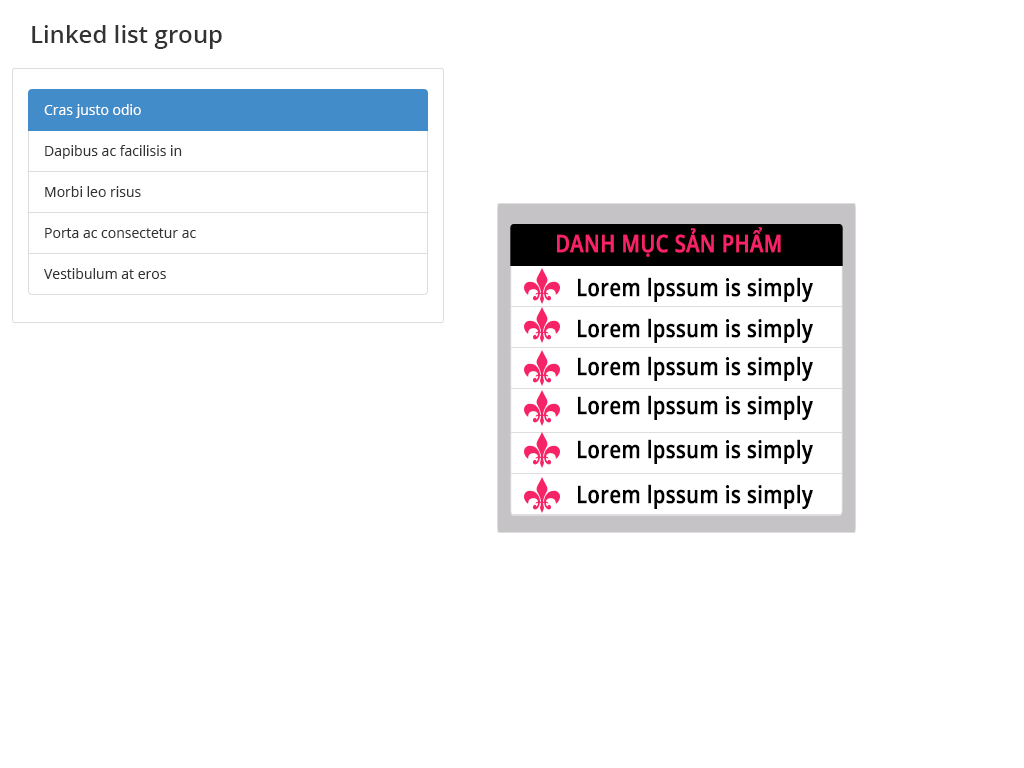
<style>
.page{position:relative;width:1024px;height:768px;background:#ffffff}
.page>*{position:absolute;margin:0}
.t1{font:24px "OpenSans-Semibold";color:#333333}
.t2{font:14px/41px "OpenSans";color:#333333}
.t3{font:14px/41px "OpenSans";color:#ffffff}
.t4{font:24px "OpenSans-Semibold";color:#f62366;font-weight:bold;scale:0.83 1}
.t5{font:24px "OpenSans-Semibold";color:#000000;font-weight:bold;scale:0.83 1}
</style>
<div class="page">
<p class="t1" style="left:32px;top:25px;width:190px;height:24px">Linked list group</p>
<p class="t2" style="left:44px;top:104px;width:152px;height:175px"><span class="t3">Cras justo odio<br></span>Dapibus ac facilisis in<br>Morbi leo risus<br>Porta ac consectetur ac<br>Vestibulum at eros</p>
<p class="t4" style="left:557px;top:227px;width:224px;height:30px">DANH MỤC SẢN PHẨM</p>
<p class="t5" style="left:578px;top:277px;width:235px;height:25px">Lorem lpssum is simply</p>
<p class="t5" style="left:578px;top:318px;width:235px;height:25px">Lorem lpssum is simply</p>
<p class="t5" style="left:578px;top:356px;width:235px;height:25px">Lorem lpssum is simply</p>
<p class="t5" style="left:578px;top:395px;width:235px;height:25px">Lorem lpssum is simply</p>
<p class="t5" style="left:578px;top:439px;width:235px;height:25px">Lorem lpssum is simply</p>
<p class="t5" style="left:578px;top:484px;width:235px;height:25px">Lorem lpssum is simply</p>
</div>
